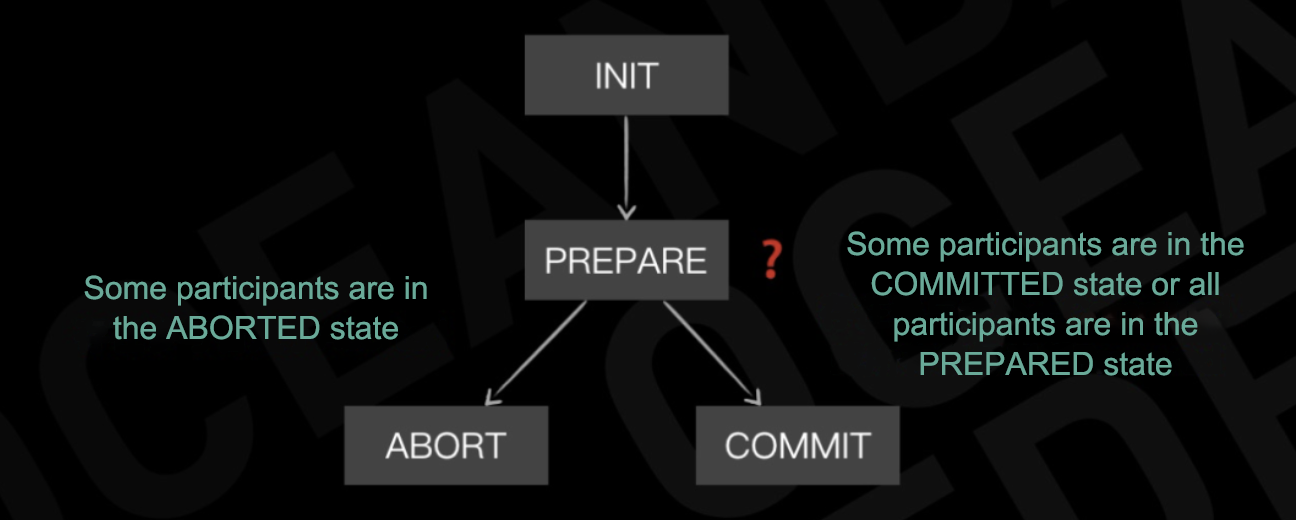
<style>
.page{position:relative;width:1296px;height:520px;background:#000000}
.page>*{position:absolute;margin:0}
.t1{font:32px/40px "ArialMT";color:#6aaa99}
</style>
<div class="page">
<p class="t1" style="left:847px;top:231px;width:397px;height:145px;text-align:center">Some participants are in the COMMITTED state or all participants are in the PREPARED state</p>
<p class="t1" style="left:84px;top:275px;width:343px;height:65px;text-align:center">Some participants are in the ABORTED state</p>
</div>
